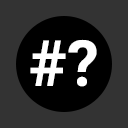
<style>
.page{position:relative;width:128px;height:128px;background:#333333}
.page>*{position:absolute;margin:0}
.t1{font:64px "Roboto-Bold";color:#ffffff}
</style>
<div class="page">
<p class="t1" style="left:30px;top:39px;width:67px;height:48px">#?</p>
</div>
